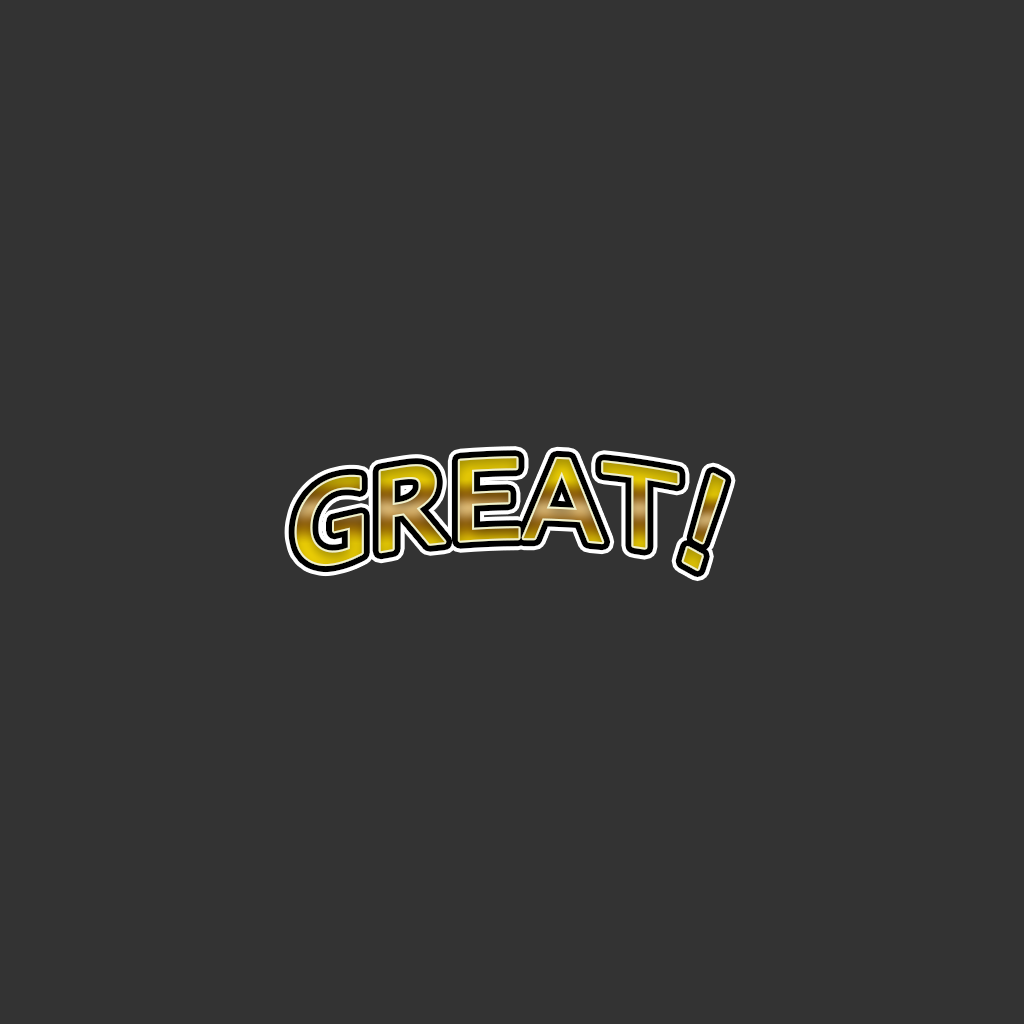
<style>
.page{position:relative;width:1024px;height:1024px;background:#333333}
.page>*{position:absolute;margin:0}
.t1{font:127.7px "LucidaConsole"}
</style>
<div class="page">
<p class="t1" style="left:296px;top:458px;width:382px;height:107px">GREAT</p>
<p class="t1" style="left:683px;top:474px;width:41px;height:96px;rotate:17deg">!</p>
</div>
